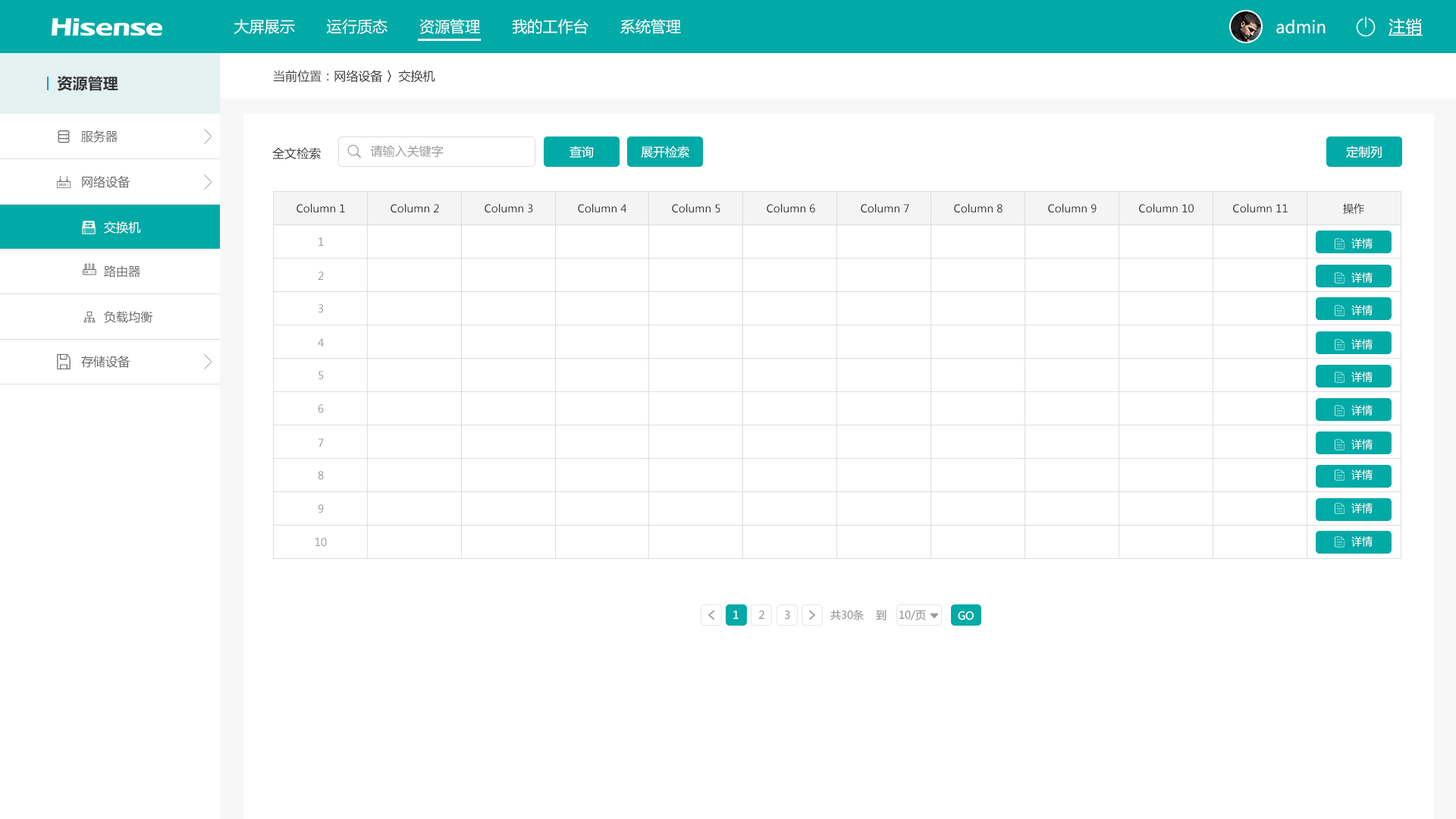
<style>
.page{position:relative;width:1456px;height:819px;background:#ffffff}
.page>*{position:absolute;margin:0}
.t1{font:15.2px "MicrosoftYaHei";letter-spacing:0.004em;color:#ffffff}
.t2{font:16.7px "MicrosoftYaHei";letter-spacing:0.004em;color:#ffffff}
.t3{font:16.7px "MicrosoftYaHei";letter-spacing:0.004em;color:#ffffff;text-decoration:underline}
.t4{font:15.2px "MicrosoftYaHei-Bold";letter-spacing:0.004em;color:#333333}
.t5{font:12.1px "MicrosoftYaHei";letter-spacing:0.004em;color:#333333}
.t6{font:12.1px "MicrosoftYaHei";letter-spacing:0.004em;color:#666666}
.t7{font:12.1px "MicrosoftYaHei";letter-spacing:0.004em;color:#999999}
.t8{font:12.1px "MicrosoftYaHei";letter-spacing:0.004em;color:#ffffff}
.t9{font:10.6px "MicrosoftYaHei";letter-spacing:0.004em;color:#333333}
.t10{font:10.6px "MicrosoftYaHei";letter-spacing:0.004em;color:#999999}
.t11{font:10.6px "MicrosoftYaHei";letter-spacing:0.004em;color:#ffffff}
.t12{font:10.6px "MicrosoftYaHei";color:#ffffff}
.t13{font:10.6px "MicrosoftYaHei";color:#999999}
</style>
<div class="page">
<p class="t1" style="left:234px;top:19px;width:447px;height:15px">大屏展示       运行质态       资源管理       我的工作台       系统管理</p>
<p class="t2" style="left:1276px;top:20px;width:50px;height:13px">admin</p>
<p class="t3" style="left:1388px;top:18px;width:35px;height:18px">注销</p>
<p class="t4" style="left:57px;top:76px;width:61px;height:15px">资源管理</p>
<p class="t5" style="left:273px;top:70px;width:162px;height:13px">当前位置：网络设备 〉交换机</p>
<p class="t6" style="left:81px;top:130px;width:37px;height:13px">服务器</p>
<p class="t5" style="left:272px;top:147px;width:49px;height:12px">全文检索</p>
<p class="t7" style="left:371px;top:145px;width:73px;height:13px">请输入关键字</p>
<p class="t8" style="left:570px;top:146px;width:24px;height:12px">查询</p>
<p class="t8" style="left:641px;top:146px;width:48px;height:12px">展开检索</p>
<p class="t8" style="left:1346px;top:146px;width:36px;height:12px">定制列</p>
<p class="t6" style="left:82px;top:175px;width:48px;height:13px">网络设备</p>
<p class="t9" style="left:297px;top:203px;width:48px;height:10px">Column 1</p>
<p class="t9" style="left:391px;top:203px;width:48px;height:10px">Column 2</p>
<p class="t9" style="left:485px;top:203px;width:48px;height:10px">Column 3</p>
<p class="t9" style="left:578px;top:203px;width:48px;height:10px">Column 4</p>
<p class="t9" style="left:672px;top:203px;width:48px;height:10px">Column 5</p>
<p class="t9" style="left:767px;top:203px;width:48px;height:10px">Column 6</p>
<p class="t9" style="left:861px;top:203px;width:48px;height:10px">Column 7</p>
<p class="t9" style="left:954px;top:203px;width:49px;height:10px">Column 8</p>
<p class="t9" style="left:1048px;top:203px;width:49px;height:10px">Column 9</p>
<p class="t9" style="left:1139px;top:203px;width:55px;height:10px">Column 10</p>
<p class="t9" style="left:1233px;top:203px;width:55px;height:10px">Column 11</p>
<p class="t9" style="left:1343px;top:203px;width:21px;height:11px">操作</p>
<p class="t8" style="left:104px;top:221px;width:37px;height:13px">交换机</p>
<p class="t10" style="left:318px;top:237px;width:6px;height:9px">1</p>
<p class="t11" style="left:1351px;top:238px;width:22px;height:11px">详情</p>
<p class="t6" style="left:104px;top:265px;width:36px;height:13px">路由器</p>
<p class="t10" style="left:318px;top:271px;width:6px;height:9px">2</p>
<p class="t11" style="left:1351px;top:272px;width:22px;height:11px">详情</p>
<p class="t10" style="left:318px;top:304px;width:5px;height:9px">3</p>
<p class="t11" style="left:1351px;top:305px;width:22px;height:10px">详情</p>
<p class="t6" style="left:104px;top:311px;width:48px;height:12px">负载均衡</p>
<p class="t10" style="left:318px;top:338px;width:6px;height:9px">4</p>
<p class="t11" style="left:1351px;top:339px;width:22px;height:11px">详情</p>
<p class="t6" style="left:81px;top:355px;width:49px;height:13px">存储设备</p>
<p class="t10" style="left:318px;top:371px;width:6px;height:9px">5</p>
<p class="t11" style="left:1351px;top:372px;width:22px;height:10px">详情</p>
<p class="t10" style="left:318px;top:404px;width:6px;height:9px">6</p>
<p class="t11" style="left:1351px;top:405px;width:22px;height:11px">详情</p>
<p class="t10" style="left:318px;top:438px;width:6px;height:9px">7</p>
<p class="t11" style="left:1351px;top:439px;width:22px;height:11px">详情</p>
<p class="t10" style="left:318px;top:471px;width:6px;height:9px">8</p>
<p class="t11" style="left:1351px;top:469px;width:22px;height:11px">详情</p>
<p class="t10" style="left:318px;top:504px;width:6px;height:9px">9</p>
<p class="t11" style="left:1351px;top:503px;width:22px;height:10px">详情</p>
<p class="t10" style="left:315px;top:538px;width:12px;height:9px">10</p>
<p class="t11" style="left:1351px;top:536px;width:22px;height:11px">详情</p>
<p class="t12" style="left:733px;top:610px;width:6px;height:10px">1</p>
<p class="t13" style="left:758px;top:610px;width:6px;height:10px">2</p>
<p class="t13" style="left:785px;top:610px;width:5px;height:10px">3</p>
<p class="t13" style="left:830px;top:610px;width:96px;height:10px">共30条    到    10/页</p>
<p class="t12" style="left:958px;top:611px;width:16px;height:9px">GO</p>
</div>
